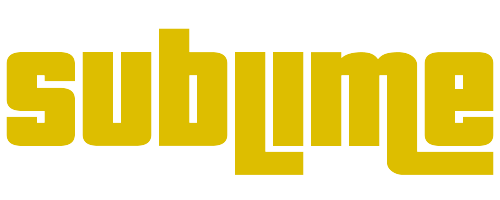
<style>
.page{position:relative;width:500px;height:200px;background:#ffffff}
.page>*{position:absolute;margin:0}
.t1{font:147px "Pricedown-Black";color:#d7b900}
</style>
<div class="page">
<p class="t1" style="left:6px;top:28px;width:488px;height:147px">Sublime</p>
</div>
